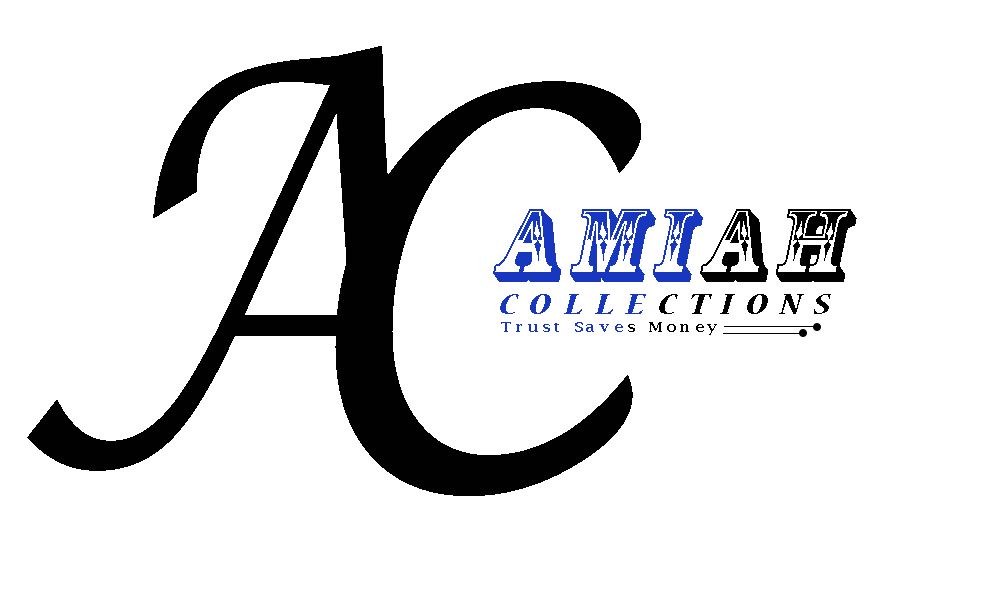
<style>
.page{position:relative;width:1000px;height:600px;background:#ffffff}
.page>*{position:absolute;margin:0}
.t1{font:545.3px "LucidaHandwriting-Italic";letter-spacing:0.34em;color:#010101;scale:0.9 1}
.t2{font:97.7px "RosewoodStd-Regular";letter-spacing:0.08em;color:#1837bf;font-style:italic;scale:1.14 1}
.t3{font:97.7px "RosewoodStd-Regular";letter-spacing:0.08em;color:#010101;font-style:italic;scale:1.14 1}
.t4{font:32.1px "NuevaStd-BoldCondItalic";letter-spacing:0.24em;color:#010101;scale:1.61 1}
.t5{font:32.1px "NuevaStd-BoldCondItalic";letter-spacing:0.24em;color:#1837bf;scale:1.61 1}
.t6{font:14.1px "LucidaBright-Demi";letter-spacing:0.24em;color:#1837bf;scale:1.15 1}
.t7{font:14.1px "LucidaBright-Demi";letter-spacing:0.24em;color:#010101;scale:1.15 1}
</style>
<div class="page">
<p class="t1" style="left:335px;top:81px;width:306px;height:415px">C</p>
<p class="t2" style="left:493px;top:209px;width:364px;height:73px">AMI<span class="t3">AH</span></p>
<p class="t4" style="left:500px;top:294px;width:331px;height:20px"><span class="t5">COLLE</span>CTIONS</p>
<p class="t6" style="left:501px;top:322px;width:216px;height:13px">Trust Save<span class="t7">s Money</span></p>
</div>
